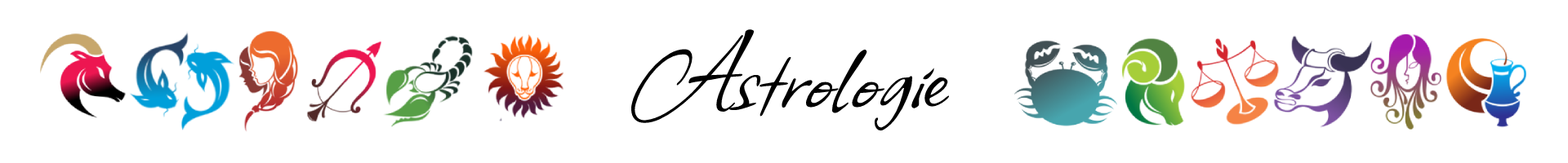
<style>
.page{position:relative;width:1568px;height:163px;background:#ffffff}
.page>*{position:absolute;margin:0}
.t1{font:118.4px "Allison-Regular";color:#000000}
</style>
<div class="page">
<p class="t1" style="left:630px;top:29px;width:320px;height:102px">Astrologie</p>
</div>
